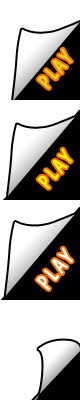
<style>
.page{position:relative;width:80px;height:400px;background:#ffffff}
.page>*{position:absolute;margin:0}
.t1{font:20.8px "DomCasualBT-Regular";letter-spacing:0.095em;color:#d8d926}
.t2{font:20.8px "DomCasualBT-Regular";letter-spacing:0.095em;color:#ffff00}
.t3{font:22.2px "DomCasualBT-Regular";letter-spacing:0.095em;color:#ffffff}
</style>
<div class="page">
<p class="t1" style="left:37px;top:48px;width:35px;height:41px;rotate:-49deg">PLAY</p>
<p class="t2" style="left:37px;top:148px;width:35px;height:41px;rotate:-49deg">PLAY</p>
<p class="t3" style="left:36px;top:247px;width:37px;height:43px;rotate:-49deg">PLAY</p>
</div>
